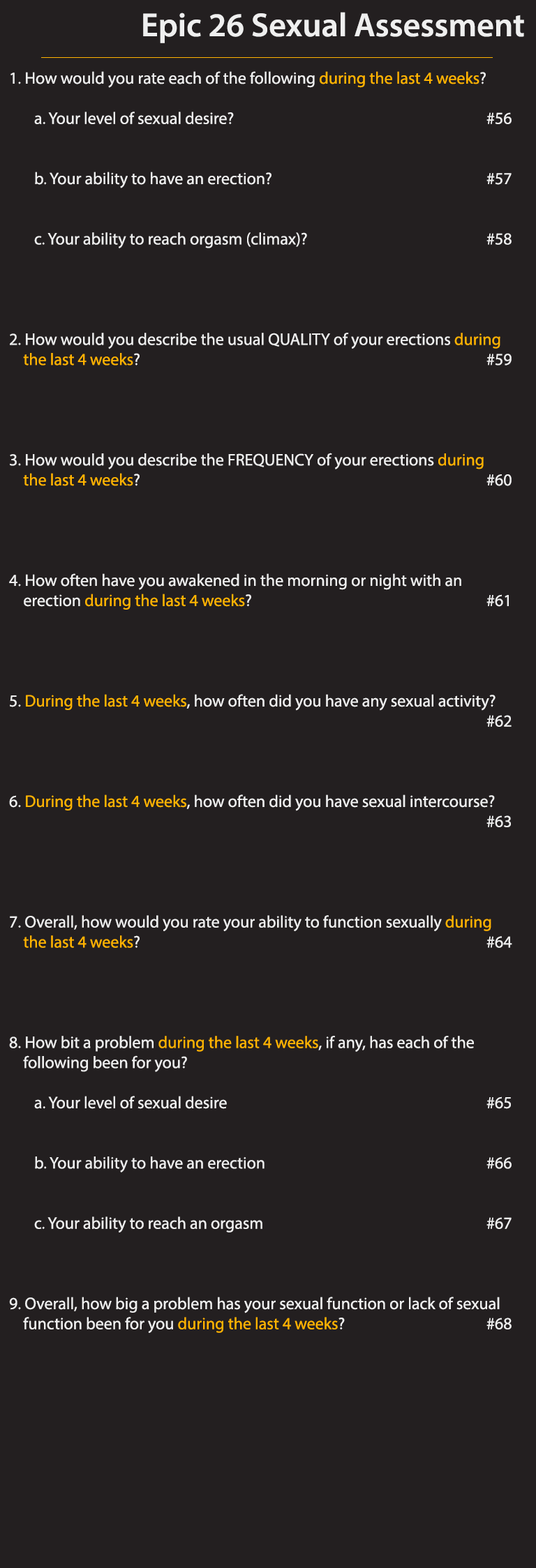
<style>
.page{position:relative;width:536px;height:1568px;background:#231f20}
.page>*{position:absolute;margin:0}
.t1{font:33.5px "MyriadPro-Semibold";color:#efefef}
.t2{font:16.7px "MyriadPro-Regular";color:#efefef}
.t3{font:16.7px "MyriadPro-Regular";color:#ffb300}
</style>
<div class="page">
<p class="t1" style="left:143px;top:12px;width:381px;height:31px">Epic 26 Sexual Assessment</p>
<p class="t2" style="left:9px;top:71px;width:503px;height:1262px">1. How would you rate each of the following <span class="t3">during the last 4 weeks</span>? <br><br> a. Your level of sexual desire?           #56<br><br><br> b. Your ability to have an erection?         #57<br><br><br> c. Your ability to reach orgasm (climax)?        #58<br><br><br><br><br>2. How would you describe the usual QUALITY of your erections <span class="t3">during<br>    the last 4 weeks</span>?              #59<br><br><br><br><br>3. How would you describe the FREQUENCY of your erections <span class="t3">during<br>    the last 4 weeks</span>?              #60<br><br><br><br><br>4. How often have you awakened in the morning or night with an<br>    erection <span class="t3">during the last 4 weeks</span>?          #61<br><br><br><br><br>5. <span class="t3">During the last 4 weeks</span>, how often did you have any sexual activity?<br>                   #62<br><br><br><br>6. <span class="t3">During the last 4 weeks</span>, how often did you have sexual intercourse?<br>                   #63<br><br><br><br><br>7. Overall, how would you rate your ability to function sexually <span class="t3">during<br>    the last 4 weeks</span>?              #64<br><br><br><br><br>8. How bit a problem <span class="t3">during the last 4 weeks</span>, if any, has each of the<br>    following been for you?<br><br> a. Your level of sexual desire           #65<br><br><br> b. Your ability to have an erection         #66<br><br><br> c. Your ability to reach an orgasm         #67<br><br><br><br>9. Overall, how big a problem has your sexual function or lack of sexual<br>    function been for you<span class="t3"> during the last 4 weeks</span>?      #68</p>
</div>
